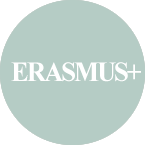
<style>
.page{position:relative;width:145px;height:145px;background:#b5ccc5}
.page>*{position:absolute;margin:0}
.t1{font:28px "TimesNewRomanPS-BoldMT";letter-spacing:-0.077em;color:#ffffff;scale:0.95 1}
</style>
<div class="page">
<p class="t1" style="left:11px;top:62px;width:130px;height:20px">ERASMUS+</p>
</div>
